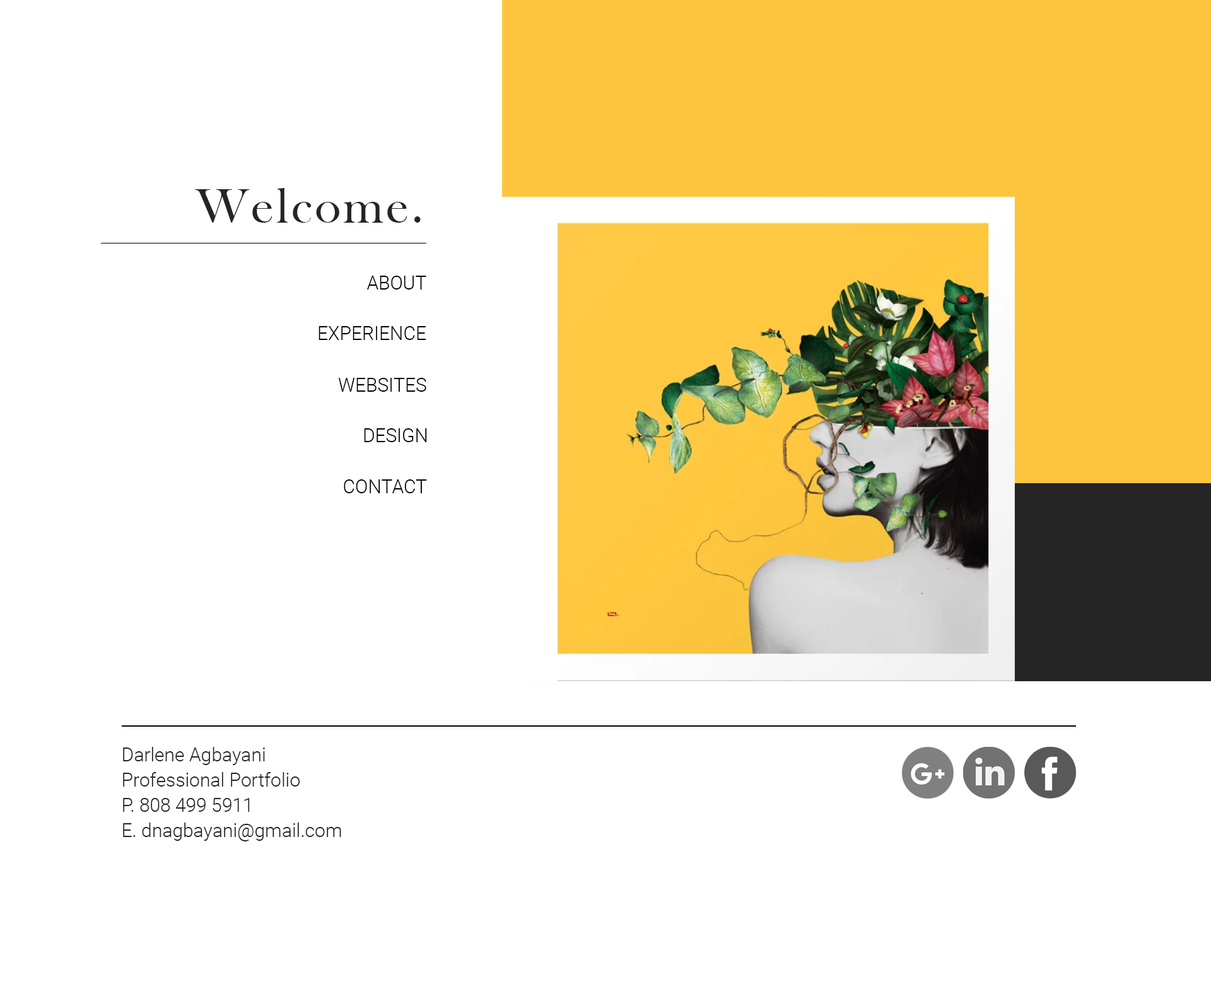
<style>
.page{position:relative;width:1211px;height:984px;background:#ffffff}
.page>*{position:absolute;margin:0}
.t1{font:50.5px "BaskOldFace";letter-spacing:0.05em;color:#252525}
.t2{font:18.9px "Roboto-Light";color:#000000}
.t3{font:18.9px/25.2px "Roboto-Light";color:#252525}
</style>
<div class="page">
<p class="t1" style="left:194px;top:188px;width:227px;height:35px">Welcome.</p>
<p class="t2" style="left:367px;top:276px;width:60px;height:14px">ABOUT</p>
<p class="t2" style="left:319px;top:326px;width:108px;height:14px">EXPERIENCE</p>
<p class="t2" style="left:338px;top:378px;width:89px;height:14px">WEBSITES</p>
<p class="t2" style="left:364px;top:428px;width:63px;height:14px">DESIGN</p>
<p class="t2" style="left:344px;top:480px;width:83px;height:13px">CONTACT</p>
<p class="t3" style="left:123px;top:747px;width:218px;height:95px">Darlene Agbayani<br>Professional Portfolio<br>P. 808 499 5911<br>E. dnagbayani@gmail.com</p>
</div>
